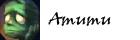
<style>
.page{position:relative;width:140px;height:40px;background:#ffffff}
.page>*{position:absolute;margin:0}
.t1{font:12px "VinerHandITC";color:#000000}
</style>
<div class="page">
<p class="t1" style="left:48px;top:12px;width:63px;height:15px">Amumu</p>
</div>
